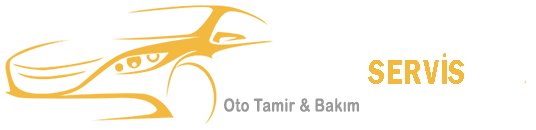
<style>
.page{position:relative;width:536px;height:130px;background:#ffffff}
.page>*{position:absolute;margin:0}
.t1{font:36px "FranklinGothic-Demi";letter-spacing:0.025em;color:#f3b93e;scale:0.8 1}
.t2{font:18px "ArialRoundedMTBold";letter-spacing:0.025em;color:#999999;scale:0.8 1}
</style>
<div class="page">
<p class="t1" style="left:368px;top:53px;width:96px;height:31px">SERVİS</p>
<p class="t2" style="left:224px;top:98px;width:135px;height:14px">Oto Tamir &amp; Bakım</p>
</div>
